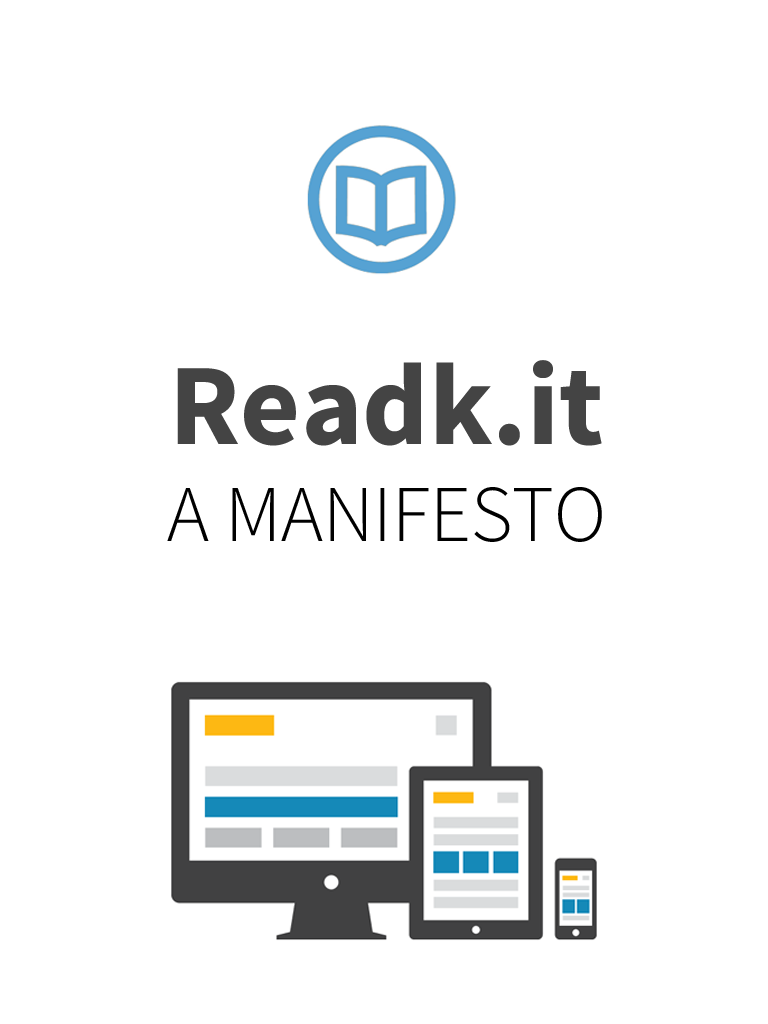
<style>
.page{position:relative;width:768px;height:1024px;background:#ffffff}
.page>*{position:absolute;margin:0}
.t1{font:80.6px "SourceSansPro-Light";color:#000000;text-transform:uppercase}
.t2{font:115.9px "SourceSansPro-Bold";color:#444444}
</style>
<div class="page">
<p class="t1" style="left:167px;top:360px;width:435px;height:182px;text-align:center"><span class="t2">Readk.it<br></span>A Manifesto</p>
</div>
